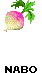
<style>
.page{position:relative;width:42px;height:73px;background:#ffffff}
.page>*{position:absolute;margin:0}
.t1{font:10.3px "Arial-BoldMT";color:#000000;scale:1.15 1}
</style>
<div class="page">
<p class="t1" style="left:5px;top:66px;width:32px;height:7px">NABO</p>
</div>
